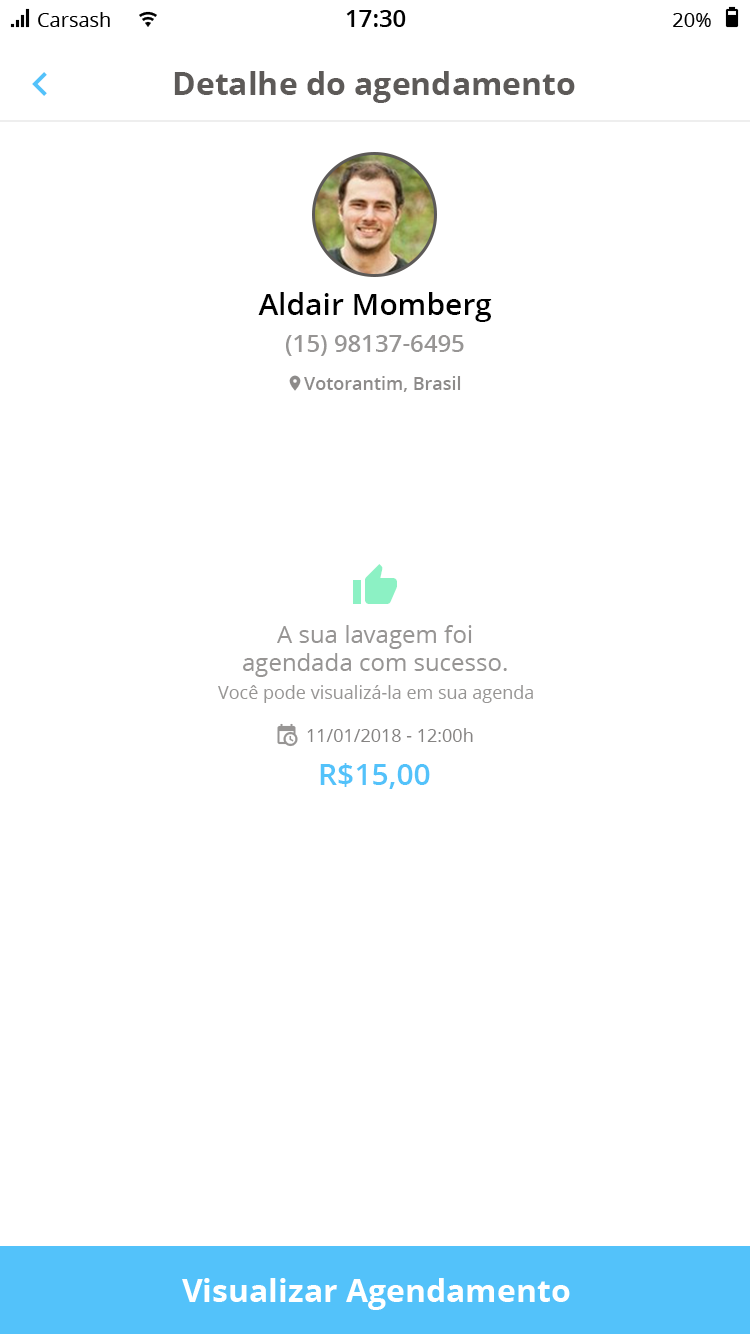
<style>
.page{position:relative;width:750px;height:1334px;background:#ffffff}
.page>*{position:absolute;margin:0}
.t1{font:32px "OpenSans-Bold";color:#5d5a58}
.t2{font:30px "OpenSans-Semibold";color:#000000}
.t3{font:24px "OpenSans-Semibold";color:#979594}
.t4{font:18px "OpenSans-Semibold";color:#8d8b8a}
.t5{font:24px "OpenSans";color:#979594}
.t6{font:18px "OpenSans";color:#979594}
.t7{font:18px "OpenSans";color:#858382}
.t8{font:30px "OpenSans-Semibold";color:#53c2fa}
</style>
<div class="page">
<p class="t1" style="left:174px;top:71px;width:401px;height:32px">Detalhe do agendamento</p>
<p class="t2" style="left:258px;top:292px;width:234px;height:30px">Aldair Momberg</p>
<p class="t3" style="left:286px;top:335px;width:178px;height:21px">(15) 98137-6495</p>
<p class="t4" style="left:304px;top:376px;width:157px;height:16px">Votorantim, Brasil</p>
<p class="t5" style="left:243px;top:625px;width:264px;height:52px;text-align:center">A sua lavagem foi<br>agendada com sucesso.</p>
<p class="t6" style="left:218px;top:685px;width:315px;height:18px">Você pode visualizá-la em sua agenda</p>
<p class="t7" style="left:307px;top:728px;width:166px;height:14px">11/01/2018 - 12:00h</p>
<p class="t8" style="left:320px;top:763px;width:110px;height:26px">R$15,00</p>
</div>
